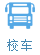
<style>
.page{position:relative;width:40px;height:55px;background:#ffffff}
.page>*{position:absolute;margin:0}
.t1{font:22.5px "SimSun";letter-spacing:0.1em;color:#4788b2;font-variant:small-caps}
</style>
<div class="page">
<p class="t1" style="left:7px;top:39px;width:25px;height:12px">校车</p>
</div>
